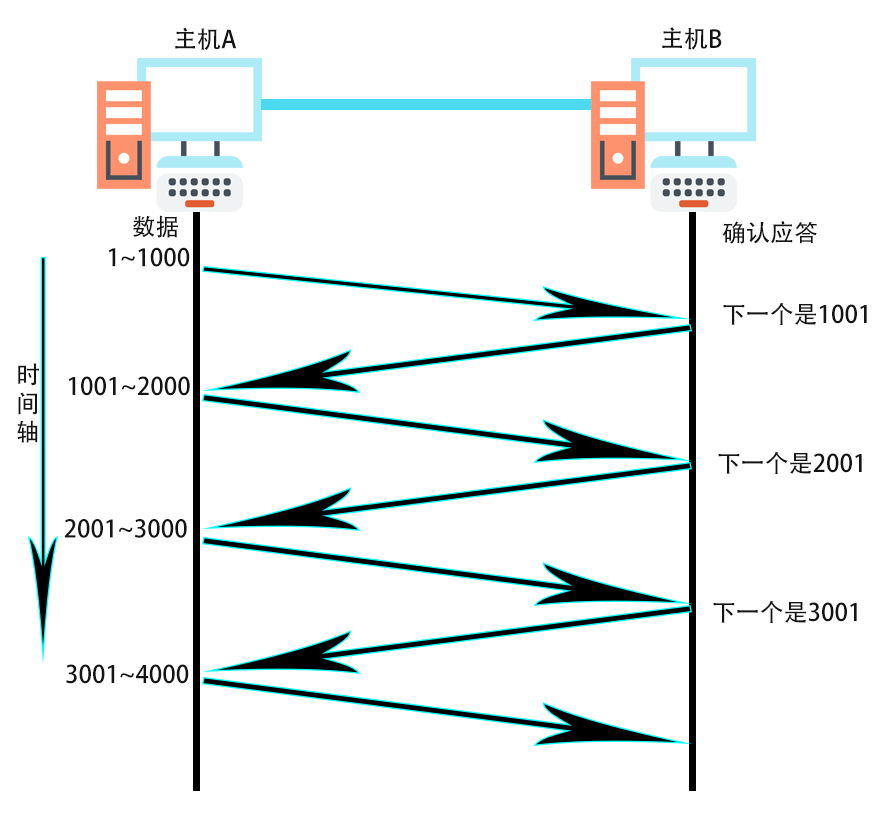
<style>
.page{position:relative;width:888px;height:835px;background:#ffffff}
.page>*{position:absolute;margin:0}
.t1{font:24px "AdobeHeitiStd-Regular";color:#151414}
</style>
<div class="page">
<p class="t1" style="left:175px;top:27px;width:62px;height:23px">主机A</p>
<p class="t1" style="left:662px;top:27px;width:60px;height:23px">主机B</p>
<p class="t1" style="left:132px;top:215px;width:46px;height:23px">数据</p>
<p class="t1" style="left:722px;top:221px;width:95px;height:23px">确认应答</p>
<p class="t1" style="left:108px;top:247px;width:82px;height:20px">1~1000</p>
<p class="t1" style="left:723px;top:302px;width:144px;height:23px">下一个是1001</p>
<p class="t1" style="left:17px;top:363px;width:22px;height:80px">时<br>间<br>轴</p>
<p class="t1" style="left:68px;top:376px;width:122px;height:20px">1001~2000</p>
<p class="t1" style="left:718px;top:451px;width:144px;height:23px">下一个是2001</p>
<p class="t1" style="left:64px;top:519px;width:123px;height:19px">2001~3000</p>
<p class="t1" style="left:713px;top:600px;width:144px;height:23px">下一个是3001</p>
<p class="t1" style="left:66px;top:664px;width:123px;height:20px">3001~4000</p>
</div>
